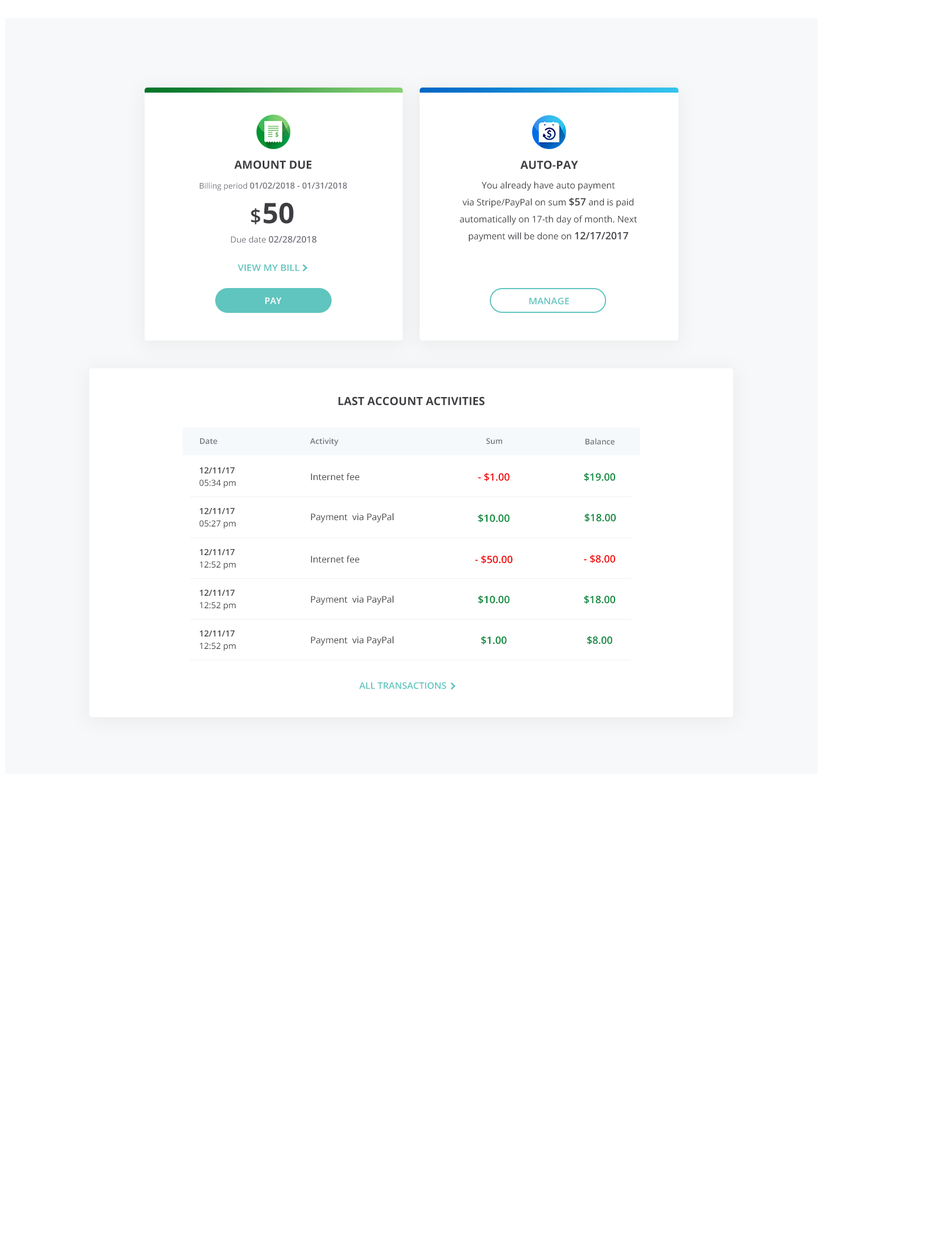
<style>
.page{position:relative;width:949px;height:1256px;background:#ffffff}
.page>*{position:absolute;margin:0}
.t1{font:11.3px "OpenSans-Bold";color:#3e3d42;text-transform:uppercase}
.t2{font:8.5px "OpenSans-SemiBold";color:#75737d}
.t3{font:7.9px "OpenSans-Regular";color:#75737d}
.t4{font:9px/16.9px "OpenSans-Regular";color:#3e3d42}
.t5{font:10.2px/16.9px "OpenSans-SemiBold";color:#3e3d42}
.t6{font:28.2px "OpenSans-Bold";color:#3e3d42}
.t7{font:19.8px "OpenSans-SemiBold";letter-spacing:0.05em;color:#3e3d42}
.t8{font:9px "OpenSans-SemiBold";color:#75737d}
.t9{font:8.5px "OpenSans-Regular";color:#75737d}
.t10{font:9px "OpenSans-SemiBold";color:#ffffff}
.t11{font:9px "OpenSans-SemiBold";color:#5fc5be;text-transform:uppercase;scale:1.05 1}
.t12{font:7.9px "OpenSans-SemiBold";color:#75737d}
.t13{font:8.5px/12.4px "OpenSans-SemiBold";color:#3e3d42}
.t14{font:8.5px/12.4px "OpenSans-Regular";color:#3e3d42}
.t15{font:9px "OpenSans-Regular";color:#3e3d42}
.t16{font:10.2px "OpenSans-SemiBold";color:#f50000}
.t17{font:10.2px "OpenSans-SemiBold";color:#008736}
.t18{font:9.1px "OpenSans-SemiBold";color:#5fc5be;text-transform:uppercase}
</style>
<div class="page">
<p class="t1" style="left:234px;top:160px;width:78px;height:9px">Amount due</p>
<p class="t1" style="left:520px;top:160px;width:58px;height:9px">Auto-pay</p>
<p class="t2" style="left:199px;top:182px;width:148px;height:9px"><span class="t3">Billing period </span>01/02/2018 - 01/31/2018</p>
<p class="t4" style="left:460px;top:181px;width:177px;height:61px;text-align:center">You already have auto payment <br>via Stripe/PayPal on sum <span class="t5">$57</span> and is paid automatically on 17-th day of month. Next payment will be done on <span class="t5">12/17/2017</span></p>
<p class="t6" style="left:251px;top:203px;width:43px;height:22px"><span class="t7">$</span>50</p>
<p class="t8" style="left:231px;top:236px;width:86px;height:7px"><span class="t9">Due date</span> 02/28/2018</p>
<p class="t10" style="left:265px;top:297px;width:17px;height:7px">PAY</p>
<p class="t11" style="left:529px;top:298px;width:40px;height:6px">Manage</p>
<p class="t1" style="left:338px;top:397px;width:147px;height:9px">Last Account activities</p>
<p class="t12" style="left:310px;top:438px;width:28px;height:8px">Activity</p>
<p class="t12" style="left:486px;top:438px;width:16px;height:7px">Sum</p>
<p class="t12" style="left:200px;top:438px;width:17px;height:7px">Date</p>
<p class="t12" style="left:585px;top:438px;width:30px;height:7px">Balance</p>
<p class="t13" style="left:199px;top:467px;width:37px;height:21px">12/11/17 <br><span class="t14">05:34 pm</span></p>
<p class="t15" style="left:311px;top:473px;width:48px;height:8px">Internet fee</p>
<p class="t16" style="left:478px;top:473px;width:32px;height:8px">- $1.00</p>
<p class="t17" style="left:584px;top:473px;width:31px;height:8px">$19.00</p>
<p class="t13" style="left:199px;top:508px;width:37px;height:21px">12/11/17 <br><span class="t14">05:27 pm</span></p>
<p class="t15" style="left:311px;top:513px;width:83px;height:10px">Payment  via PayPal</p>
<p class="t17" style="left:478px;top:514px;width:32px;height:9px">$10.00</p>
<p class="t17" style="left:585px;top:514px;width:31px;height:8px">$18.00</p>
<p class="t13" style="left:199px;top:549px;width:37px;height:21px">12/11/17 <br><span class="t14">12:52 pm</span></p>
<p class="t15" style="left:311px;top:555px;width:48px;height:8px">Internet fee</p>
<p class="t16" style="left:475px;top:555px;width:38px;height:9px">- $50.00</p>
<p class="t16" style="left:584px;top:555px;width:31px;height:8px">- $8.00</p>
<p class="t13" style="left:199px;top:590px;width:37px;height:21px">12/11/17 <br><span class="t14">12:52 pm</span></p>
<p class="t15" style="left:311px;top:595px;width:83px;height:10px">Payment  via PayPal</p>
<p class="t17" style="left:478px;top:595px;width:32px;height:9px">$10.00</p>
<p class="t17" style="left:584px;top:595px;width:31px;height:9px">$18.00</p>
<p class="t13" style="left:199px;top:630px;width:37px;height:21px">12/11/17 <br><span class="t14">12:52 pm</span></p>
<p class="t15" style="left:311px;top:636px;width:83px;height:10px">Payment  via PayPal</p>
<p class="t17" style="left:481px;top:636px;width:26px;height:9px">$1.00</p>
<p class="t17" style="left:587px;top:636px;width:25px;height:9px">$8.00</p>
<p class="t18" style="left:359px;top:682px;width:87px;height:7px">all transactions</p>
</div>
